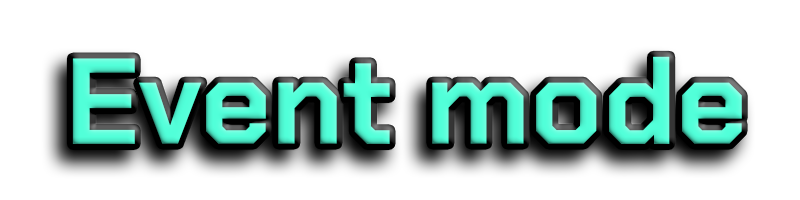
<style>
.page{position:relative;width:800px;height:200px;background:#ffffff}
.page>*{position:absolute;margin:0}
.t1{font:122px "ChakraPetch-Bold";color:#51ffd9}
</style>
<div class="page">
<p class="t1" style="left:72px;top:56px;width:670px;height:88px">Event mode</p>
</div>
